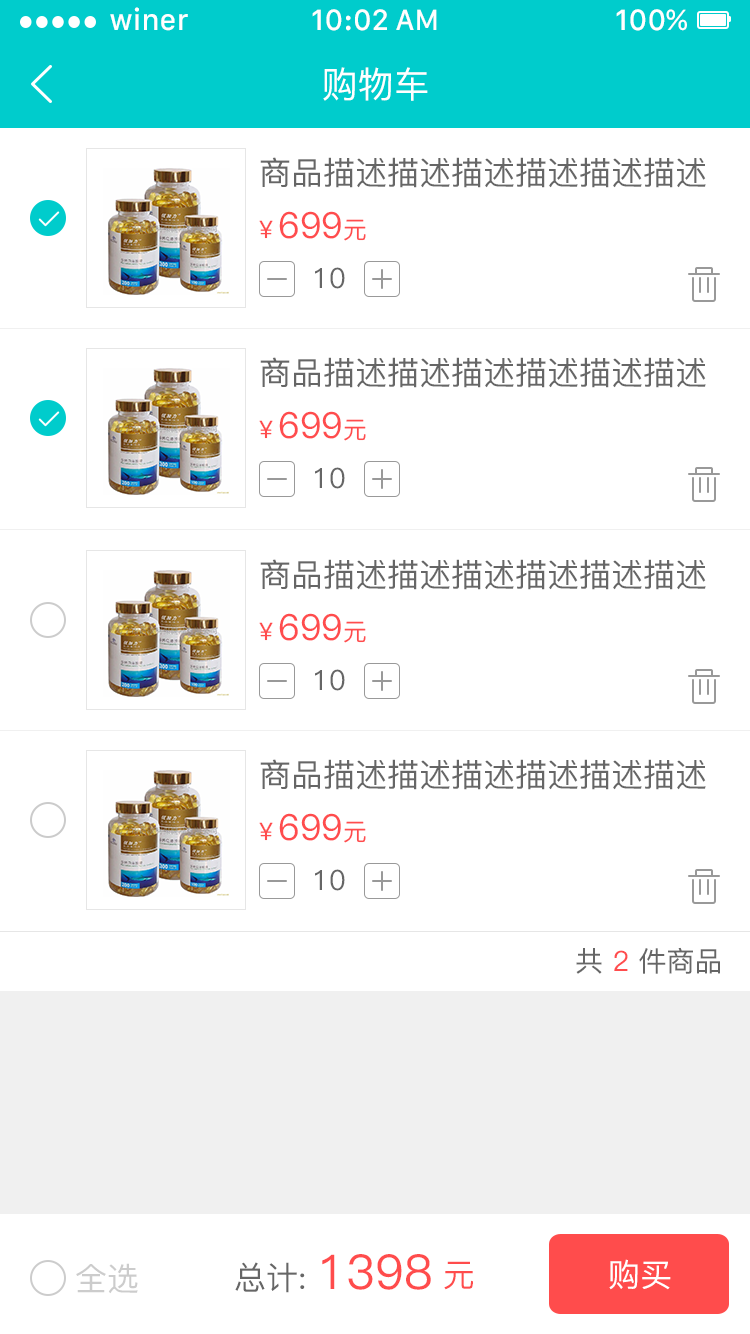
<style>
.page{position:relative;width:750px;height:1334px;background:#ffffff}
.page>*{position:absolute;margin:0}
.t1{font:28px "HelveticaNeueDeskInterface-MediumP4";color:#ffffff}
.t2{font:28px "HelveticaNeueDeskInterface-MediumP4";color:#fffefe}
.t3{font:36px "PingFang-SC-Medium"}
.t4{font:36px "PingFang-SC-Medium";color:#ffffff}
.t5{font:32px "PingFang-SC-Medium";color:#666666}
.t6{font:36px "PingFang-SC-Medium";color:#ff4c4d}
.t7{font:24px "PingFang-SC-Medium";color:#ff4c4d}
.t8{font:28px "PingFang-SC-Medium";color:#666666}
.t9{font:28px "PingFang-SC-Medium";color:#ff4c4d}
.t10{font:48px "PingFang-SC-Medium";color:#ff4c4c}
.t11{font:32px "PingFang-SC-Medium";color:#cccccc}
.t12{font:32px "PingFang-SC-Medium";color:#ff4c4c}
.t13{font:32px "PingFang-SC-Medium";color:#ffffff}
</style>
<div class="page">
<p class="t1" style="left:110px;top:7px;width:78px;height:24px">winer</p>
<p class="t2" style="left:312px;top:9px;width:125px;height:22px">10:02 AM</p>
<p class="t1" style="left:616px;top:9px;width:71px;height:22px">100%</p>
<p class="t3" style="left:322px;top:68px;width:105px;height:34px">购物车</p>
<p class="t4" style="left:323px;top:67px;width:105px;height:34px">购物车</p>
<p class="t5" style="left:260px;top:157px;width:446px;height:31px">商品描述描述描述描述描述描述</p>
<p class="t6" style="left:259px;top:211px;width:107px;height:30px"><span class="t7">￥</span>699<span class="t7">元</span></p>
<p class="t8" style="left:315px;top:267px;width:30px;height:22px">10</p>
<p class="t5" style="left:260px;top:357px;width:446px;height:31px">商品描述描述描述描述描述描述</p>
<p class="t6" style="left:259px;top:411px;width:107px;height:30px"><span class="t7">￥</span>699<span class="t7">元</span></p>
<p class="t8" style="left:315px;top:467px;width:30px;height:22px">10</p>
<p class="t5" style="left:260px;top:559px;width:446px;height:31px">商品描述描述描述描述描述描述</p>
<p class="t6" style="left:259px;top:613px;width:107px;height:30px"><span class="t7">￥</span>699<span class="t7">元</span></p>
<p class="t8" style="left:315px;top:669px;width:30px;height:22px">10</p>
<p class="t5" style="left:260px;top:759px;width:446px;height:31px">商品描述描述描述描述描述描述</p>
<p class="t6" style="left:259px;top:813px;width:107px;height:30px"><span class="t7">￥</span>699<span class="t7">元</span></p>
<p class="t8" style="left:315px;top:869px;width:30px;height:22px">10</p>
<p class="t8" style="left:576px;top:947px;width:144px;height:27px">共 <span class="t9">2 </span>件商品</p>
<p class="t10" style="left:235px;top:1254px;width:196px;height:39px"><span class="t5">总计: </span>1398</p>
<p class="t11" style="left:76px;top:1263px;width:62px;height:31px">全选</p>
<p class="t12" style="left:444px;top:1261px;width:29px;height:29px">元</p>
<p class="t13" style="left:609px;top:1259px;width:62px;height:31px">购买</p>
</div>
